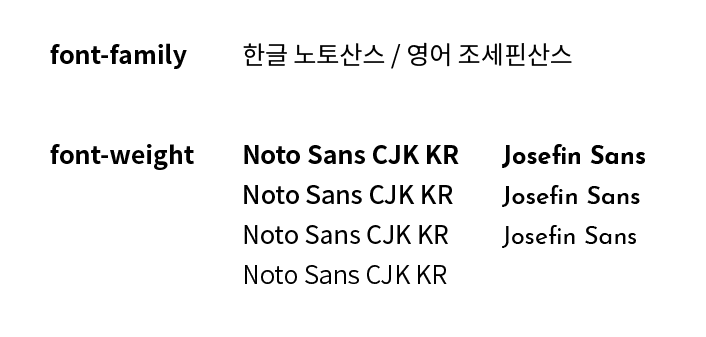
<style>
.page{position:relative;width:706px;height:337px;background:#ffffff}
.page>*{position:absolute;margin:0}
.t1{font:25px "NotoSansCJKkr-Bold";color:#000000}
.t2{font:25px "NotoSansCJKkr-Regular";color:#000000}
.t3{font:25px/40px "NotoSansCJKkr-Bold";color:#000000}
.t4{font:25px/40px "NotoSansCJKkr-Medium";color:#000000}
.t5{font:25px/40px "NotoSansCJKkr-Regular";color:#000000}
.t6{font:25px/40px "NotoSansCJKkr-DemiLight";color:#000000}
.t7{font:25px/40px "JosefinSans-Bold";color:#000000}
.t8{font:25px/40px "JosefinSans-SemiBold";color:#000000}
.t9{font:25px/40px "JosefinSans-Regular";color:#000000}
</style>
<div class="page">
<p class="t1" style="left:50px;top:43px;width:137px;height:26px">font-family</p>
<p class="t2" style="left:243px;top:42px;width:329px;height:27px">한글 노토산스 / 영어 조세핀산스</p>
<p class="t1" style="left:50px;top:144px;width:144px;height:26px">font-weight</p>
<p class="t3" style="left:244px;top:145px;width:215px;height:139px">Noto Sans CJK KR<br><span class="t4">Ｎoto Sans CJK KR<br></span><span class="t5">Ｎoto Sans CJK KR<br></span><span class="t6">Noto Sans CJK KR</span></p>
<p class="t7" style="left:502px;top:144px;width:143px;height:104px">Josefin Sans<br><span class="t8">Josefin Sans<br></span><span class="t9">Josefin Sans</span></p>
</div>
